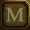
<style>
.page{position:relative;width:30px;height:30px}
.page>*{position:absolute;margin:0}
.t1{font:20px "TimesNewRomanPSMT";color:#7a827d;font-weight:bold}
</style>
<div class="page">
<p class="t1" style="left:6px;top:7px;width:19px;height:15px">M</p>
</div>
